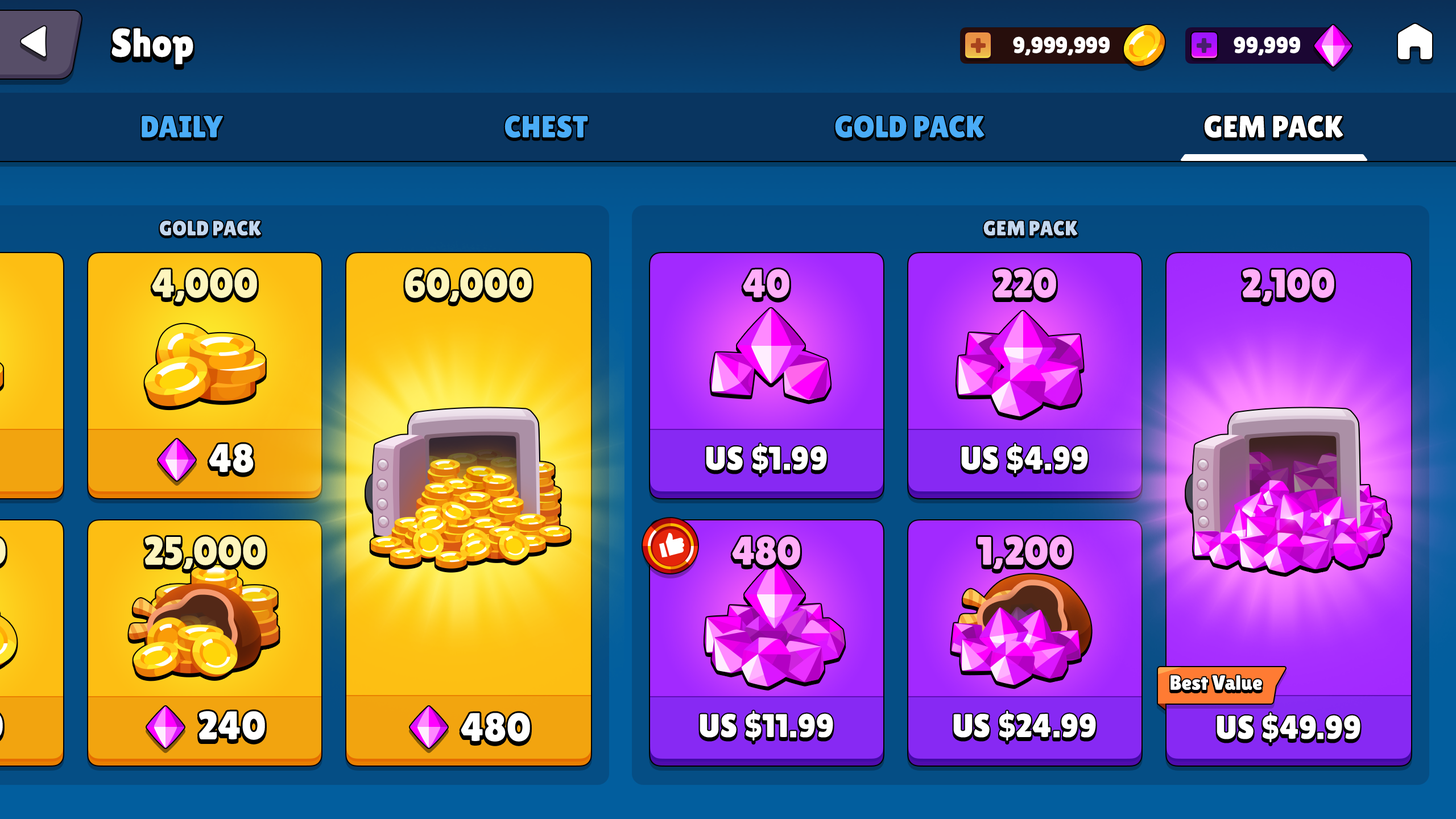
<style>
.page{position:relative;width:1456px;height:819px}
.page>*{position:absolute;margin:0}
.t1{font:39.8px "LilitaOne";color:#ffffff}
.t2{font:22.7px "LilitaOne";letter-spacing:-0.01em;color:#ffffff;text-transform:uppercase}
.t3{font:30.7px "LilitaOne";color:#4aacf7;text-transform:uppercase}
.t4{font:30.7px "LilitaOne";color:#ffffff;text-transform:uppercase}
.t5{font:20.5px "LilitaOne";letter-spacing:-0.01em;color:#c3d7ef;text-transform:uppercase}
.t6{font:39.8px "LilitaOne";color:#ffaef8}
.t7{font:33px "LilitaOne";letter-spacing:0.02em;color:#ffffff;text-transform:uppercase}
.t8{font:20.5px "LilitaOne";color:#ffffff}
</style>
<div class="page">
<p class="t1" style="left:111px;top:28px;width:82px;height:36px">Shop</p>
<p class="t2" style="left:1013px;top:36px;width:97px;height:20px">9,999,999</p>
<p class="t2" style="left:1234px;top:36px;width:66px;height:20px">99,999</p>
<p class="t3" style="left:142px;top:115px;width:82px;height:23px">Daily</p>
<p class="t3" style="left:504px;top:115px;width:84px;height:23px">Chest</p>
<p class="t3" style="left:835px;top:115px;width:149px;height:23px">Gold Pack</p>
<p class="t4" style="left:1204px;top:115px;width:139px;height:23px">Gem pack</p>
<p class="t5" style="left:983px;top:221px;width:95px;height:14px">Gem pack</p>
<p class="t6" style="left:743px;top:269px;width:46px;height:29px">40</p>
<p class="t6" style="left:994px;top:269px;width:62px;height:29px">220</p>
<p class="t6" style="left:1243px;top:269px;width:91px;height:33px">2,100</p>
<p class="t7" style="left:706px;top:443px;width:121px;height:31px">us $1.99</p>
<p class="t7" style="left:961px;top:443px;width:127px;height:31px">us $4.99</p>
<p class="t6" style="left:732px;top:536px;width:68px;height:29px">480</p>
<p class="t6" style="left:978px;top:536px;width:94px;height:33px">1,200</p>
<p class="t8" style="left:1170px;top:675px;width:92px;height:15px">Best Value</p>
<p class="t7" style="left:700px;top:710px;width:133px;height:31px">us $11.99</p>
<p class="t7" style="left:953px;top:710px;width:143px;height:31px">us $24.99</p>
<p class="t7" style="left:1217px;top:712px;width:143px;height:31px">us $49.99</p>
</div>
